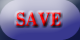
<style>
.page{position:relative;width:80px;height:40px}
.page>*{position:absolute;margin:0}
.t1{font:18px "MyungjoXB-HM"}
</style>
<div class="page">
<p class="t1" style="left:16px;top:12px;width:45px;height:14px">SAVE</p>
</div>
